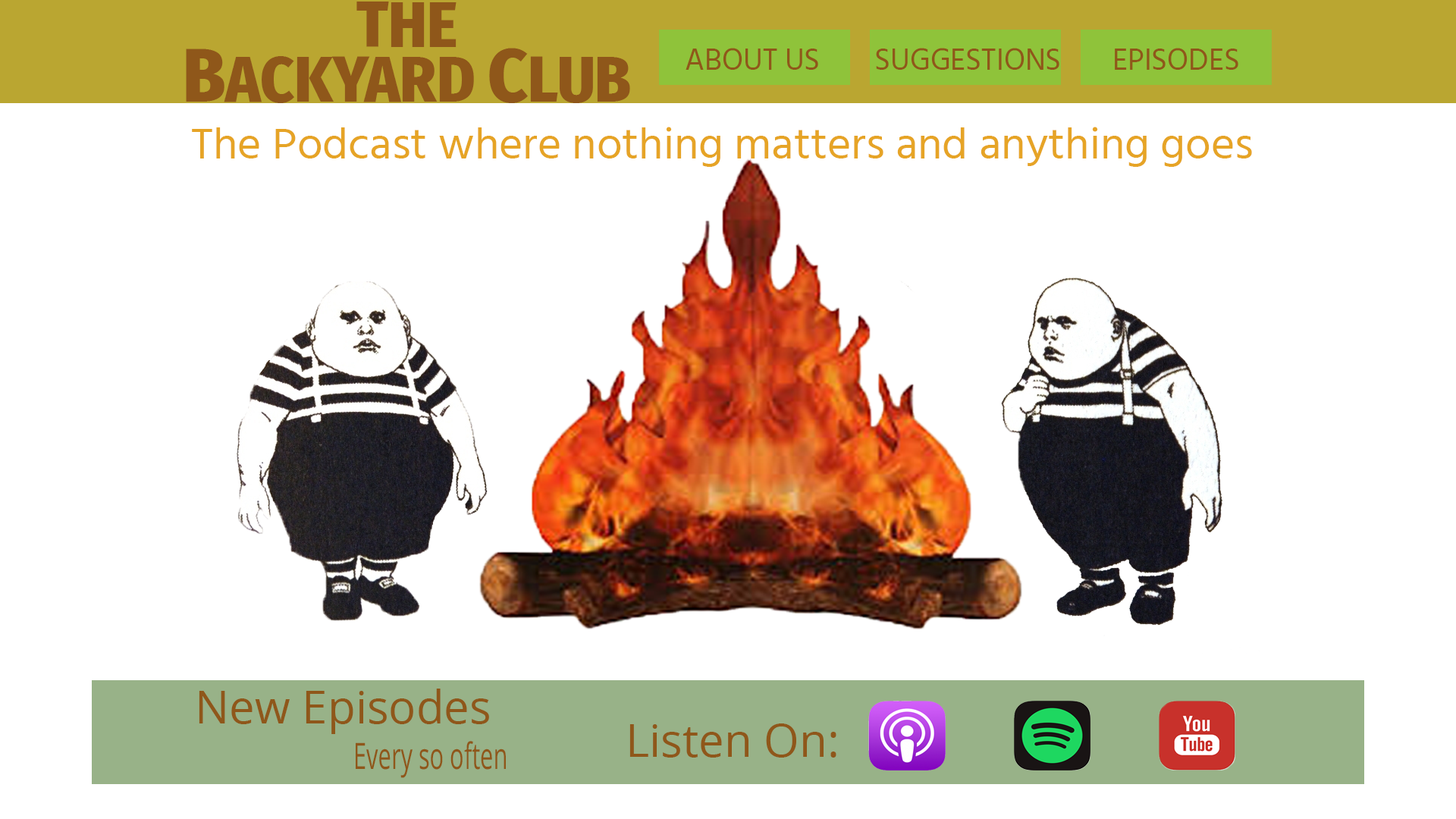
<style>
.page{position:relative;width:1456px;height:819px;background:#ffffff}
.page>*{position:absolute;margin:0}
.t1{font:64.5px/54.6px "FiraSansCondensed-ExtraBold";color:#8f571a}
.t2{font:75.8px/54.6px "FiraSansCondensed-ExtraBold";color:#8f571a}
.t3{font:30.3px "HindGuntur-Regular";color:#8f571a}
.t4{font:44px "HindGuntur-Regular";color:#e6a426;scale:1.03 1}
.t5{font:45.5px "OpenSans-Regular";color:#8f571a}
.t6{font:36.4px "OpenSans-Regular";color:#8f571a;scale:0.64 1}
</style>
<div class="page">
<p class="t1" style="left:186px;top:2px;width:444px;height:101px;text-align:center">THE<br><span class="t2">B</span>ACKYARD <span class="t2">C</span>LUB</p>
<p class="t3" style="left:686px;top:48px;width:132px;height:22px">ABOUT US</p>
<p class="t3" style="left:876px;top:48px;width:183px;height:22px">SUGGESTIONS</p>
<p class="t3" style="left:1115px;top:48px;width:123px;height:22px">EPISODES</p>
<p class="t4" style="left:192px;top:127px;width:1060px;height:40px">The Podcast where nothing matters and anything goes</p>
<p class="t5" style="left:199px;top:689px;width:290px;height:45px">New Episodes</p>
<p class="t5" style="left:629px;top:723px;width:207px;height:35px">Listen On:</p>
<p class="t6" style="left:356px;top:741px;width:150px;height:37px">Every so often</p>
</div>
